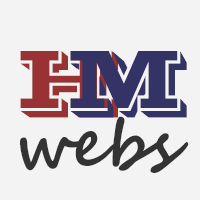
<style>
.page{position:relative;width:200px;height:200px;background:#f4f3f3}
.page>*{position:absolute;margin:0}
.t1{font:85px "VinetaBT-Regular";text-transform:uppercase}
.t2{font:85px "VinetaBT-Regular";color:#333366;text-transform:uppercase}
.t3{font:65px "SegoeScript-Bold";color:#333333}
</style>
<div class="page">
<p class="t1" style="left:20px;top:51px;width:98px;height:67px">H</p>
<p class="t2" style="left:70px;top:51px;width:117px;height:67px">M</p>
<p class="t3" style="left:20px;top:116px;width:169px;height:57px">webs</p>
</div>
